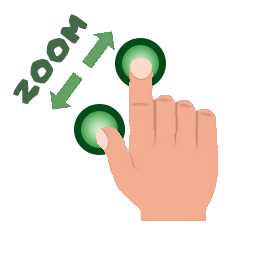
<style>
.page{position:relative;width:256px;height:256px;background:#ffffff}
.page>*{position:absolute;margin:0}
.t1{font:12.2px "PrehistoricCaveman";letter-spacing:0.1em;color:#436847}
</style>
<div class="page">
<p class="t1" style="left:13px;top:14px;width:75px;height:90px;rotate:-52deg">ZOOM</p>
</div>
